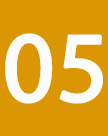
<style>
.page{position:relative;width:108px;height:136px;background:#db9603}
.page>*{position:absolute;margin:0}
.t1{font:100px "MyriadPro-Regular";color:#fdfcfc;font-weight:bold}
</style>
<div class="page">
<p class="t1" style="left:5px;top:33px;width:98px;height:71px">05</p>
</div>
